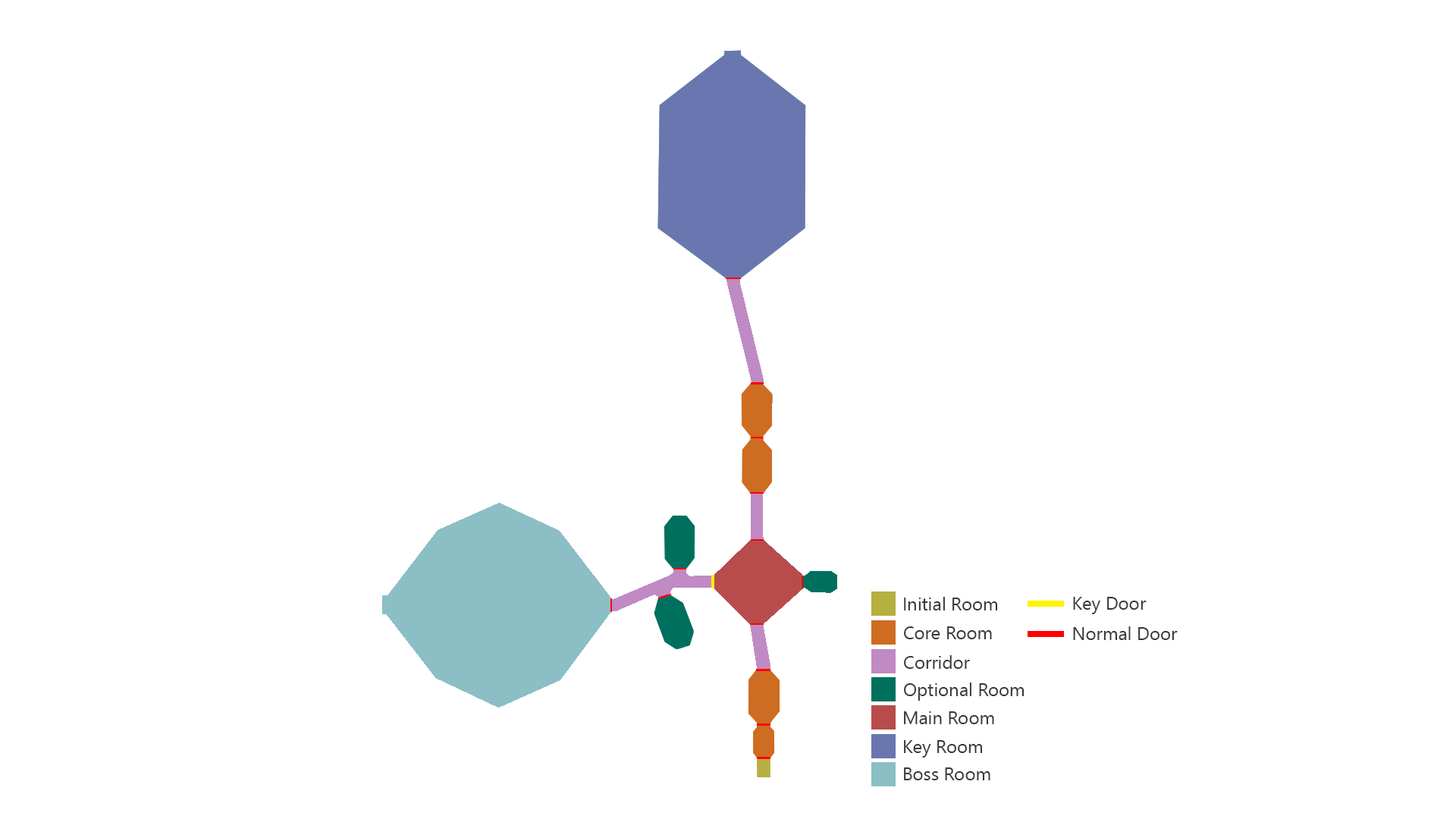
<style>
.page{position:relative;width:1456px;height:819px;background:#ffffff}
.page>*{position:absolute;margin:0}
.t1{font:18.2px "SegoeUISymbol";color:#393939}
</style>
<div class="page">
<p class="t1" style="left:904px;top:597px;width:94px;height:13px">Initial Room</p>
<p class="t1" style="left:1073px;top:597px;width:74px;height:17px">Key Door</p>
<p class="t1" style="left:904px;top:626px;width:88px;height:13px">Core Room</p>
<p class="t1" style="left:1073px;top:626px;width:105px;height:14px">Normal Door</p>
<p class="t1" style="left:904px;top:655px;width:66px;height:14px">Corridor</p>
<p class="t1" style="left:904px;top:682px;width:120px;height:19px">Optional Room</p>
<p class="t1" style="left:904px;top:711px;width:90px;height:13px">Main Room</p>
<p class="t1" style="left:904px;top:740px;width:79px;height:18px">Key Room</p>
<p class="t1" style="left:904px;top:767px;width:86px;height:13px">Boss Room</p>
</div>
